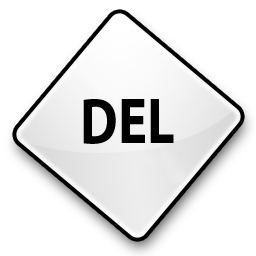
<style>
.page{position:relative;width:256px;height:256px;background:#ffffff}
.page>*{position:absolute;margin:0}
.t1{font:66px "MyriadPro-Bold";letter-spacing:0.005em;color:#010101;scale:0.82 1}
</style>
<div class="page">
<p class="t1" style="left:83px;top:99px;width:91px;height:45px">DEL</p>
</div>
